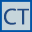
<style>
.page{position:relative;width:32px;height:32px;background:#c6d5db}
.page>*{position:absolute;margin:0}
.t1{font:23.2px "MyriadPro-Regular";color:#214b83}
</style>
<div class="page">
<p class="t1" style="left:4px;top:8px;width:25px;height:17px">CT</p>
</div>
